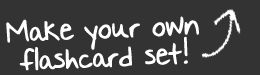
<style>
.page{position:relative;width:260px;height:75px;background:#333333}
.page>*{position:absolute;margin:0}
.t1{font:24px "NothingYouCouldSay";letter-spacing:-0.025em;color:#ffffff;font-weight:bold}
</style>
<div class="page">
<p class="t1" style="left:6px;top:16px;width:193px;height:55px;rotate:-2deg">Make your own<br> flashcard set!</p>
</div>
